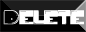
<style>
.page{position:relative;width:86px;height:32px;background:#000000}
.page>*{position:absolute;margin:0}
.t1{font:14px "PacFont";color:#ffffff}
</style>
<div class="page">
<p class="t1" style="left:3px;top:10px;width:81px;height:15px">Delete</p>
</div>
